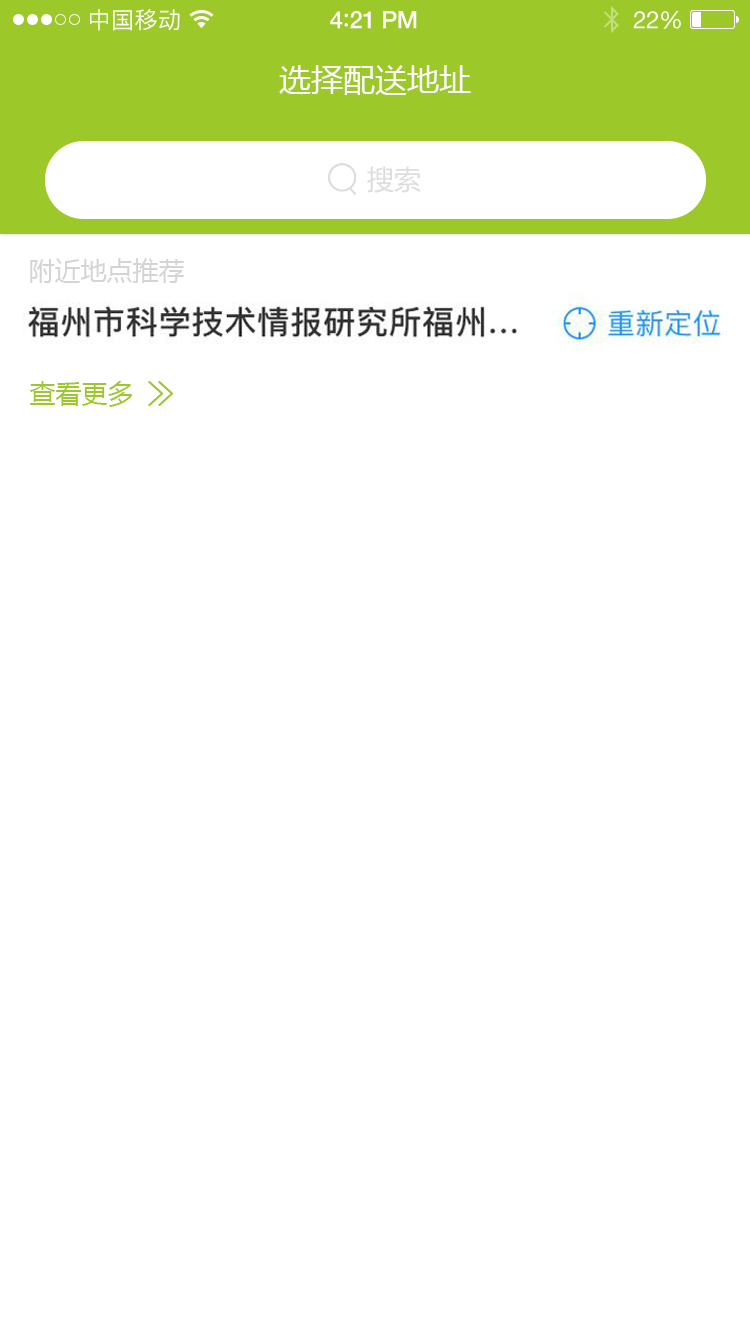
<style>
.page{position:relative;width:750px;height:1334px;background:#ffffff}
.page>*{position:absolute;margin:0}
.t1{font:23px "PingFangSC-Regular";letter-spacing:0.02em;color:#ffffff}
.t2{font:24px "HelveticaNeue-Medium";letter-spacing:-0.02em;color:#ffffff}
.t3{font:26px "Avenir-Medium";letter-spacing:-0.02em;color:#ffffff}
.t4{font:24px "HelveticaNeue";letter-spacing:-0.02em;color:#ffffff}
.t5{font:32px "MicrosoftYaHei";color:#ffffff;text-transform:uppercase}
.t6{font:26.9px "MicrosoftYaHei";color:#dddddd;text-transform:uppercase}
.t7{font:26px "MicrosoftYaHei";color:#d4d4d4;text-transform:uppercase}
.t8{font:26px "MicrosoftYaHei";color:#9cc829;text-transform:uppercase}
</style>
<div class="page">
<p class="t1" style="left:90px;top:9px;width:90px;height:22px">中国移动</p>
<p class="t2" style="left:330px;top:11px;width:87px;height:18px">4<span class="t3">:</span>21 PM</p>
<p class="t4" style="left:633px;top:11px;width:48px;height:18px">22%</p>
<p class="t5" style="left:279px;top:65px;width:192px;height:30px">选择配送地址</p>
<p class="t6" style="left:367px;top:166px;width:54px;height:27px">搜索</p>
<p class="t7" style="left:30px;top:258px;width:154px;height:25px">附近地点推荐</p>
<p class="t8" style="left:29px;top:381px;width:103px;height:26px">查看更多</p>
</div>
